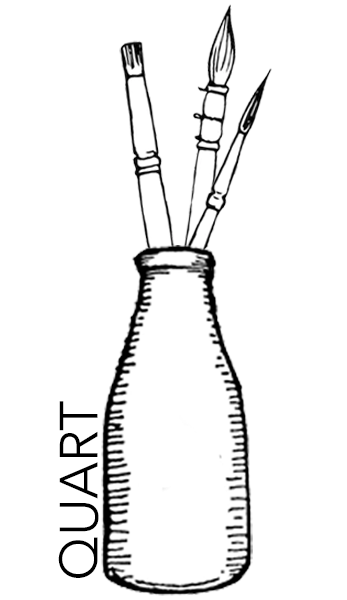
<style>
.page{position:relative;width:347px;height:600px;background:#ffffff}
.page>*{position:absolute;margin:0}
.t1{font:53.2px "AvenirNext-Regular";color:#000000}
</style>
<div class="page">
<p class="t1" style="left:58px;top:401px;width:41px;height:177px;rotate:-90deg">QUART</p>
</div>
